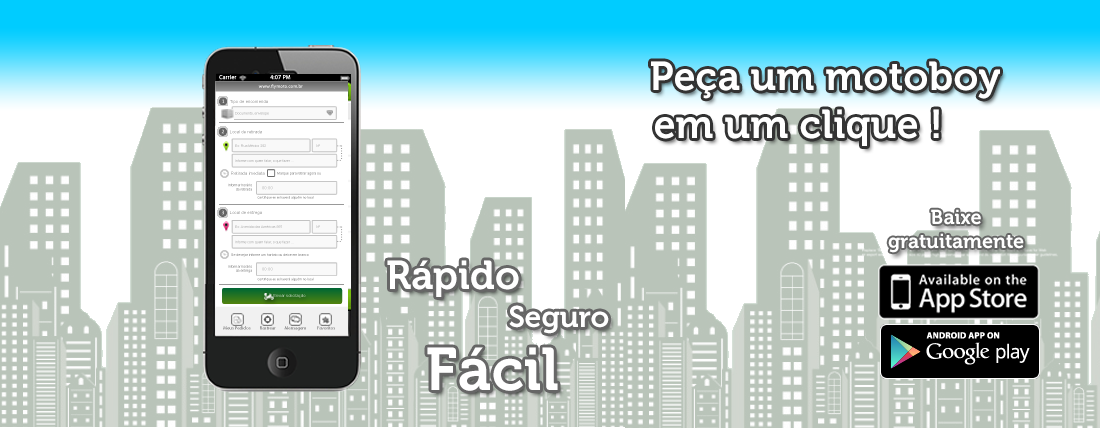
<style>
.page{position:relative;width:1100px;height:428px;background:#b9c4b9}
.page>*{position:absolute;margin:0}
.t1{font:40px "Museo700-Regular";color:#ffffff}
.t2{font:20px/24px "Museo700-Regular";color:#ffffff}
.t3{font:30px "Museo700-Regular";color:#ffffff}
.t4{font:60px "Museo700-Regular";color:#ffffff}
</style>
<div class="page">
<p class="t1" style="left:651px;top:61px;width:349px;height:38px">Peça um motoboy</p>
<p class="t1" style="left:655px;top:109px;width:284px;height:37px">em um clique !</p>
<p class="t2" style="left:888px;top:209px;width:136px;height:44px;text-align:center">Baixe<br>gratuitamente</p>
<p class="t1" style="left:387px;top:260px;width:132px;height:37px">Rápido</p>
<p class="t3" style="left:509px;top:305px;width:100px;height:29px">Seguro</p>
<p class="t4" style="left:427px;top:347px;width:131px;height:44px">Fácil</p>
</div>
